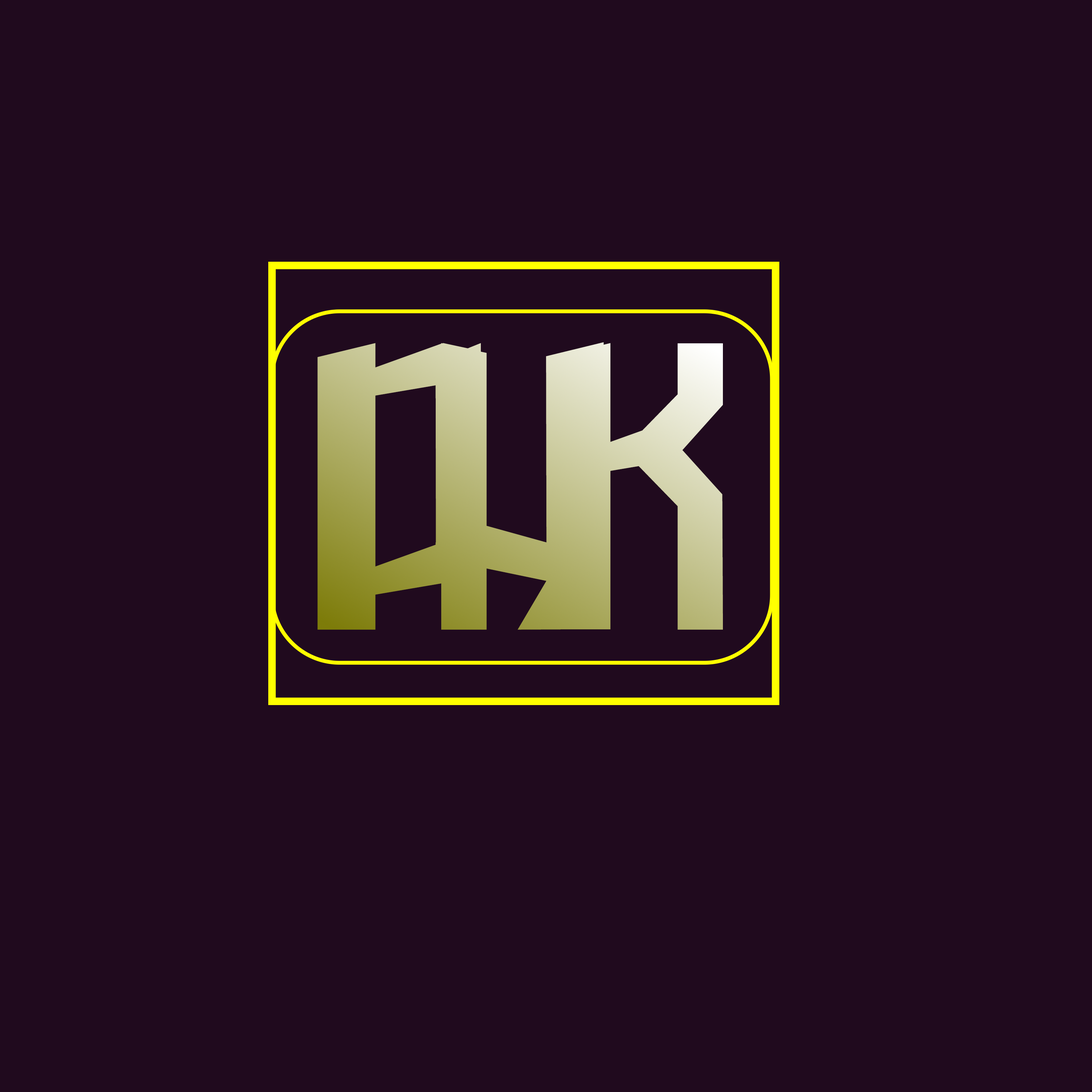
<style>
.page{position:relative;width:1092px;height:1092px;background:#200a1e}
.page>*{position:absolute;margin:0}
.t1{font:286.7px "Winter-in-Gotham-Regular";letter-spacing:-0.26em;text-transform:uppercase;scale:1.18 1}
</style>
<div class="page">
<p class="t1" style="left:317px;top:342px;width:406px;height:288px">ayk</p>
</div>
